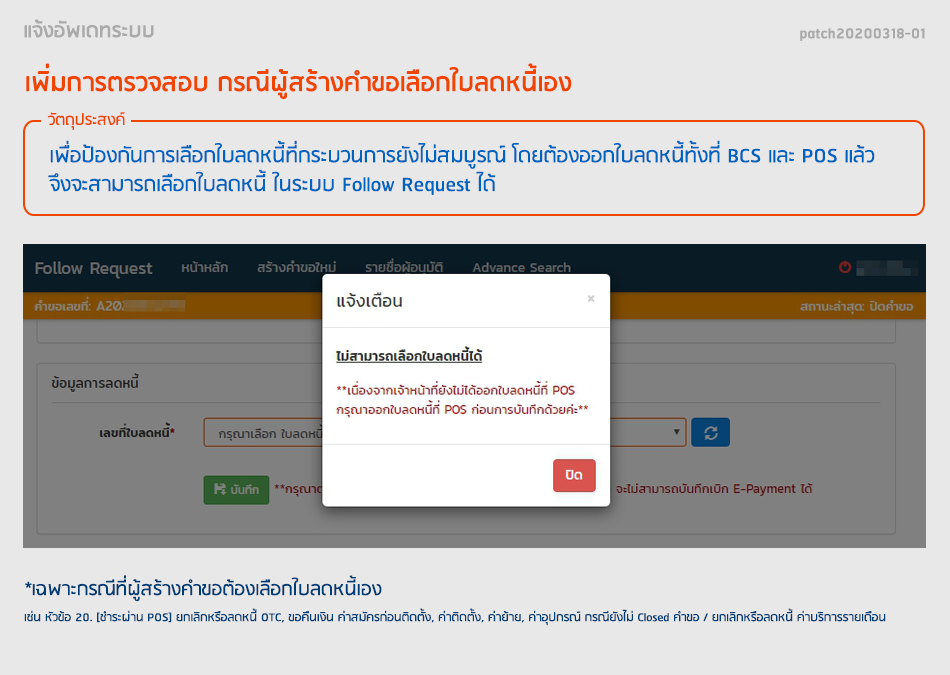
<style>
.page{position:relative;width:950px;height:675px;background:#e8e8e8}
.page>*{position:absolute;margin:0}
.t1{font:24px "RSU-Bold";color:#aaaaaa}
.t2{font:18px "RSU-Bold";color:#aaaaaa}
.t3{font:30px "RSU-Bold";color:#f04500}
.t4{font:18px "RSU";color:#f04500}
.t5{font:24px "RSU";color:#0063c0}
.t6{font:22px "RSU";color:#003d76}
.t7{font:14px "RSU";color:#003d76}
</style>
<div class="page">
<p class="t1" style="left:24px;top:19px;width:130px;height:19px">แจ้งอัพเดทระบบ</p>
<p class="t2" style="left:800px;top:28px;width:125px;height:13px">patch20200318-01</p>
<p class="t3" style="left:26px;top:63px;width:546px;height:36px">เพิ่มการตรวจสอบ กรณีผู้สร้างคำขอเลือกใบลดหนี้เอง</p>
<p class="t4" style="left:47px;top:112px;width:78px;height:18px">วัตถุประสงค์</p>
<p class="t5" style="left:48px;top:140px;width:827px;height:55px">เพื่อป้องกันการเลือกใบลดหนี้ที่กระบวนการยังไม่สมบูรณ์ โดยต้องออกใบลดหนี้ทั้งที่ BCS และ POS แล้ว<br>จึงจะสามารถเลือกใบลดหนี้ ในระบบ Follow Request ได้</p>
<p class="t6" style="left:25px;top:575px;width:357px;height:27px">*เฉพาะกรณีที่ผู้สร้างคำขอต้องเลือกใบลดหนี้เอง</p>
<p class="t7" style="left:24px;top:608px;width:862px;height:18px">เช่น หัวข้อ 20. [ชำระผ่าน POS] ยกเลิกหรือลดหนี้ OTC, ขอคืนเงิน ค่าสมัครก่อนติดตั้ง, ค่าติดตั้ง, ค่าย้าย, ค่าอุปกรณ์ กรณียังไม่ Closed คำขอ / ยกเลิกหรือลดหนี้ ค่าบริการรายเดือน</p>
</div>
